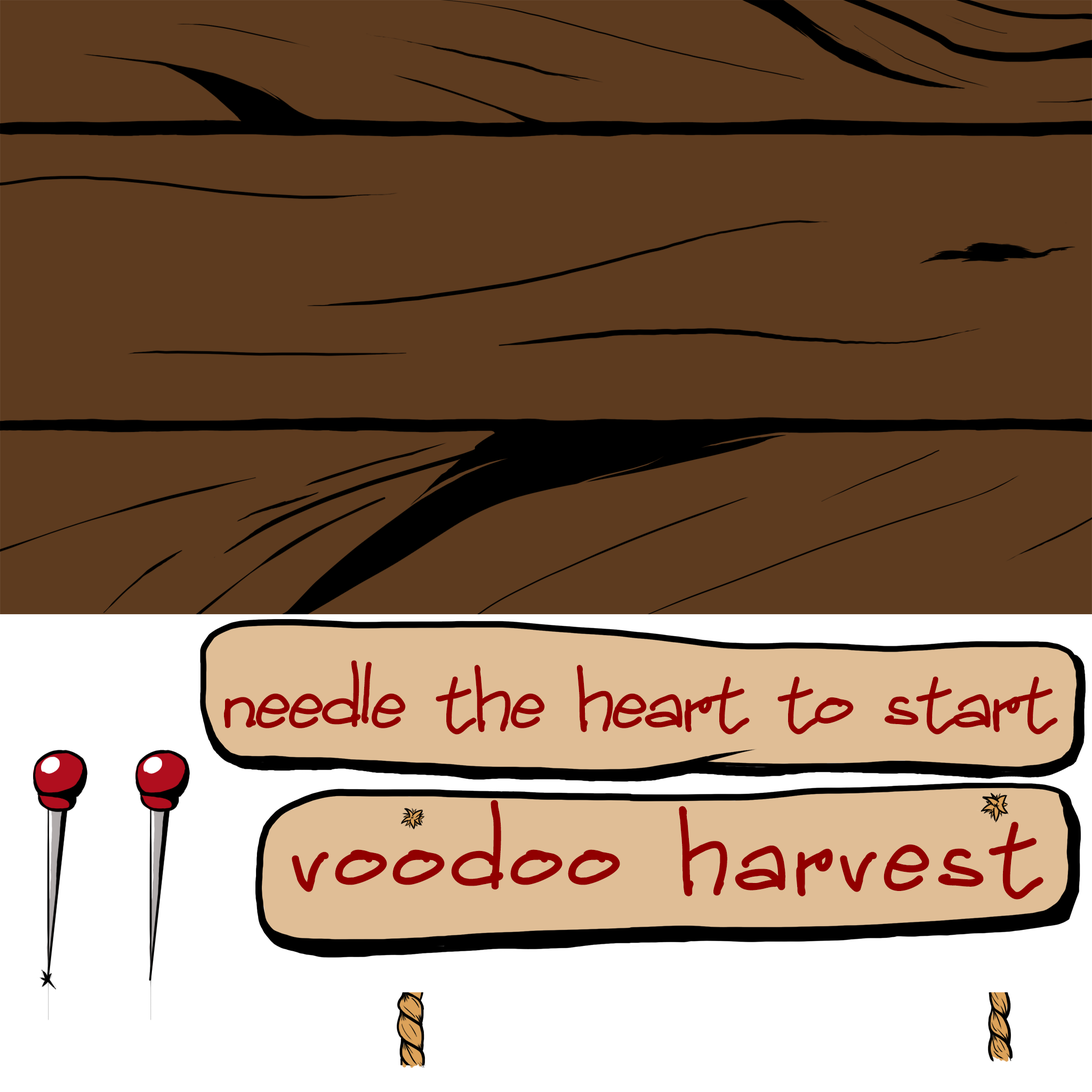
<style>
.page{position:relative;width:1092px;height:1092px;background:#5d3b1f}
.page>*{position:absolute;margin:0}
.t1{font:125.6px "ChildrenHandwritten";letter-spacing:-0.05em;color:#910000}
.t2{font:168.6px "ChildrenHandwritten";color:#910000}
</style>
<div class="page">
<p class="t1" style="left:224px;top:660px;width:834px;height:75px">needle the heart to start</p>
<p class="t2" style="left:292px;top:800px;width:751px;height:100px">voodoo harvest</p>
</div>
